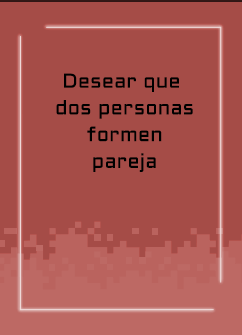
<style>
.page{position:relative;width:242px;height:335px;background:#a54c47}
.page>*{position:absolute;margin:0}
.t1{font:20px/26.7px "Aldrich-Regular";letter-spacing:0.015em;color:#000000}
</style>
<div class="page">
<p class="t1" style="left:56px;top:73px;width:137px;height:99px;text-align:center">Desear que <br>dos personas<br>formen<br>pareja</p>
</div>
